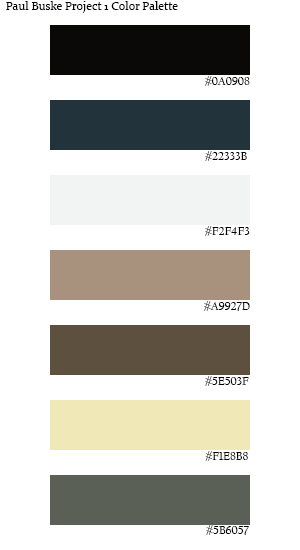
<style>
.page{position:relative;width:300px;height:550px;background:#ffffff}
.page>*{position:absolute;margin:0}
.t1{font:12px "Constantia";color:#000000}
.t2{font:12px "CalifornianFB-Reg";color:#000000}
</style>
<div class="page">
<p class="t1" style="left:6px;top:1px;width:172px;height:12px">Paul Buske Project 1 Color Palette</p>
<p class="t2" style="left:205px;top:76px;width:45px;height:10px">#0A0908</p>
<p class="t2" style="left:205px;top:151px;width:42px;height:10px">#22333B</p>
<p class="t2" style="left:205px;top:226px;width:45px;height:10px">#F2F4F3</p>
<p class="t2" style="left:204px;top:301px;width:46px;height:10px">#A9927D</p>
<p class="t2" style="left:205px;top:376px;width:44px;height:10px">#5E503F</p>
<p class="t2" style="left:205px;top:451px;width:43px;height:10px">#F1E8B8</p>
<p class="t2" style="left:206px;top:525px;width:43px;height:10px">#5B6057</p>
</div>
